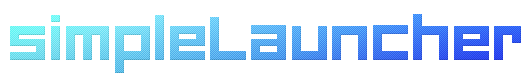
<style>
.page{position:relative;width:529px;height:84px;background:#ffffff}
.page>*{position:absolute;margin:0}
.t1{font:82px "FORCED-SQUARE";letter-spacing:-0.03em}
</style>
<div class="page">
<p class="t1" style="left:10px;top:14px;width:511px;height:59px">simpleLauncher</p>
</div>
